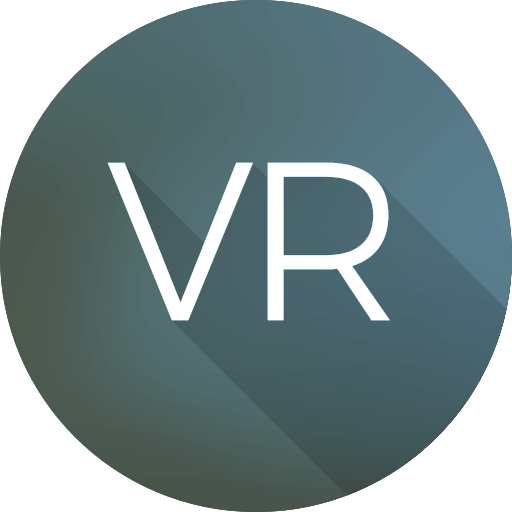
<style>
.page{position:relative;width:512px;height:512px;background:#ffffff}
.page>*{position:absolute;margin:0}
.t1{font:225px "Montserrat-Light";letter-spacing:-0.05em;color:#ffffff}
</style>
<div class="page">
<p class="t1" style="left:107px;top:162px;width:283px;height:159px">VR</p>
</div>
